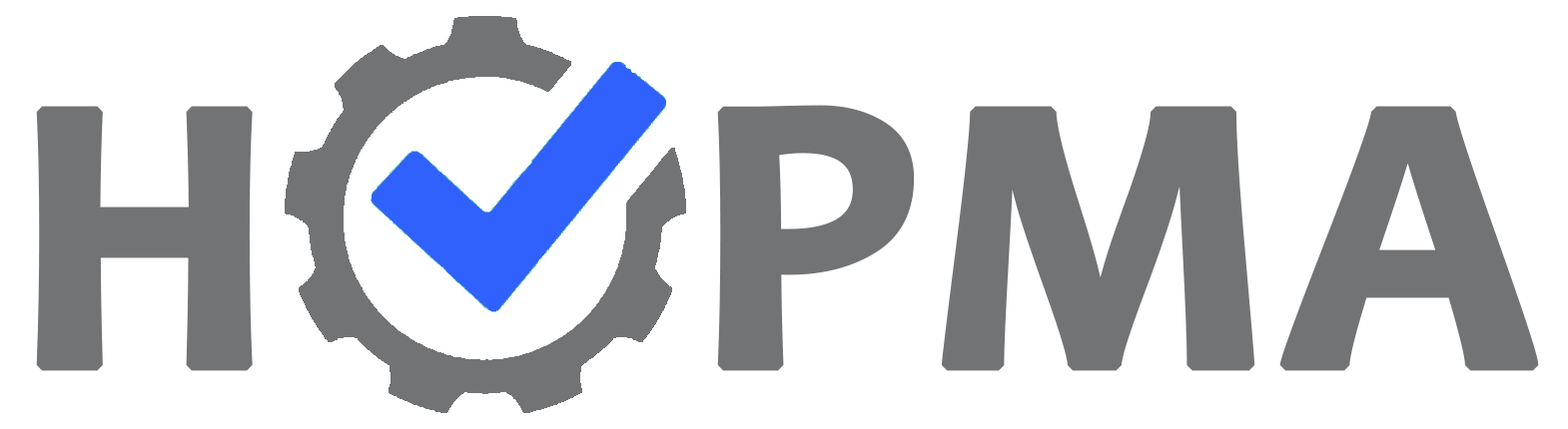
<style>
.page{position:relative;width:1568px;height:429px;background:#ffffff}
.page>*{position:absolute;margin:0}
.t1{font:399.5px "Candara-Bold";color:#727375;font-weight:bold}
</style>
<div class="page">
<p class="t1" style="left:36px;top:106px;width:217px;height:266px">Н</p>
<p class="t1" style="left:717px;top:105px;width:822px;height:267px">РМА</p>
</div>
